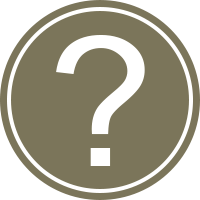
<style>
.page{position:relative;width:200px;height:200px;background:#7b755a}
.page>*{position:absolute;margin:0}
.t1{font:180px "ArialNarrow";color:#ffffff;scale:1.3 1}
</style>
<div class="page">
<p class="t1" style="left:56px;top:35px;width:89px;height:131px">?</p>
</div>
